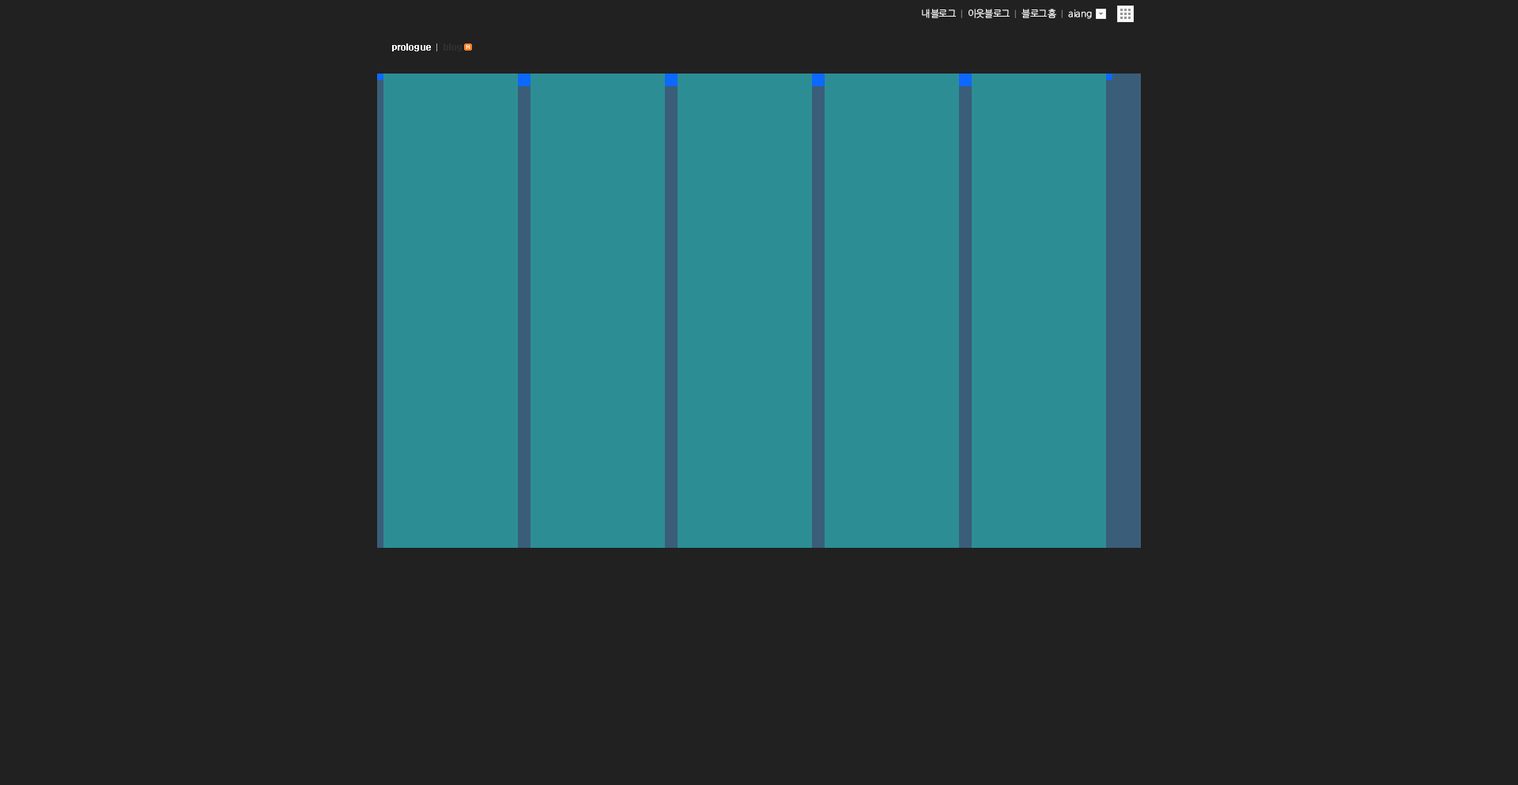
<style>
.page{position:relative;width:1518px;height:785px;background:#212121}
.page>*{position:absolute;margin:0}
.t1{font:9.5px "NanumGothicOTF";letter-spacing:-0.05em;color:#ffffff}
.t2{font:9.5px "NanumGothicOTF";letter-spacing:0.05em;color:#ffffff}
.t3{font:8.7px "NanumGothicOTF";color:#717074}
.t4{font:9.5px "NanumGothicOTF";color:#ffffff}
.t5{font:9.5px "Dotum";letter-spacing:-0.075em;color:#ffffff;font-weight:bold}
.t6{font:8.7px "Dotum";letter-spacing:-0.075em;color:#ababab}
.t7{font:9.5px "Dotum";letter-spacing:-0.075em;color:#303030;font-weight:bold}
</style>
<div class="page">
<p class="t1" style="left:922px;top:9px;width:170px;height:10px"><span class="t2">내</span>블로그<span class="t3">  |  </span>이웃블로그<span class="t3">  |  </span>블로<span class="t2">그</span>홈<span class="t3">  |  </span><span class="t4">aiang</span></p>
<p class="t5" style="left:392px;top:43px;width:70px;height:8px">prologue  <span class="t6">|  </span><span class="t7">blog</span></p>
</div>
